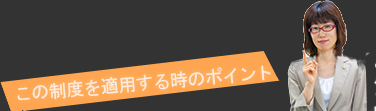
<style>
.page{position:relative;width:376px;height:111px;background:#333333}
.page>*{position:absolute;margin:0}
.t1{font:18px "MS-Gothic";color:#fdebdf}
</style>
<div class="page">
<p class="t1" style="left:17px;top:65px;width:254px;height:36px;rotate:-5deg">この制度を適用する時のポイント</p>
</div>
